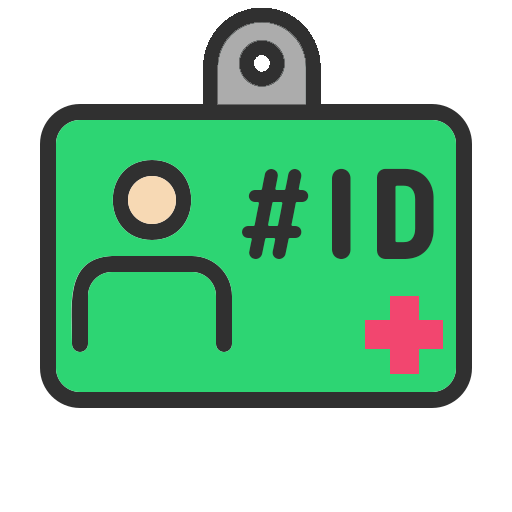
<style>
.page{position:relative;width:512px;height:512px;background:#ffffff}
.page>*{position:absolute;margin:0}
.t1{font:128px "BudokanRounded-Bold";letter-spacing:0.12em;color:#303030}
</style>
<div class="page">
<p class="t1" style="left:242px;top:168px;width:192px;height:91px">#id</p>
</div>
